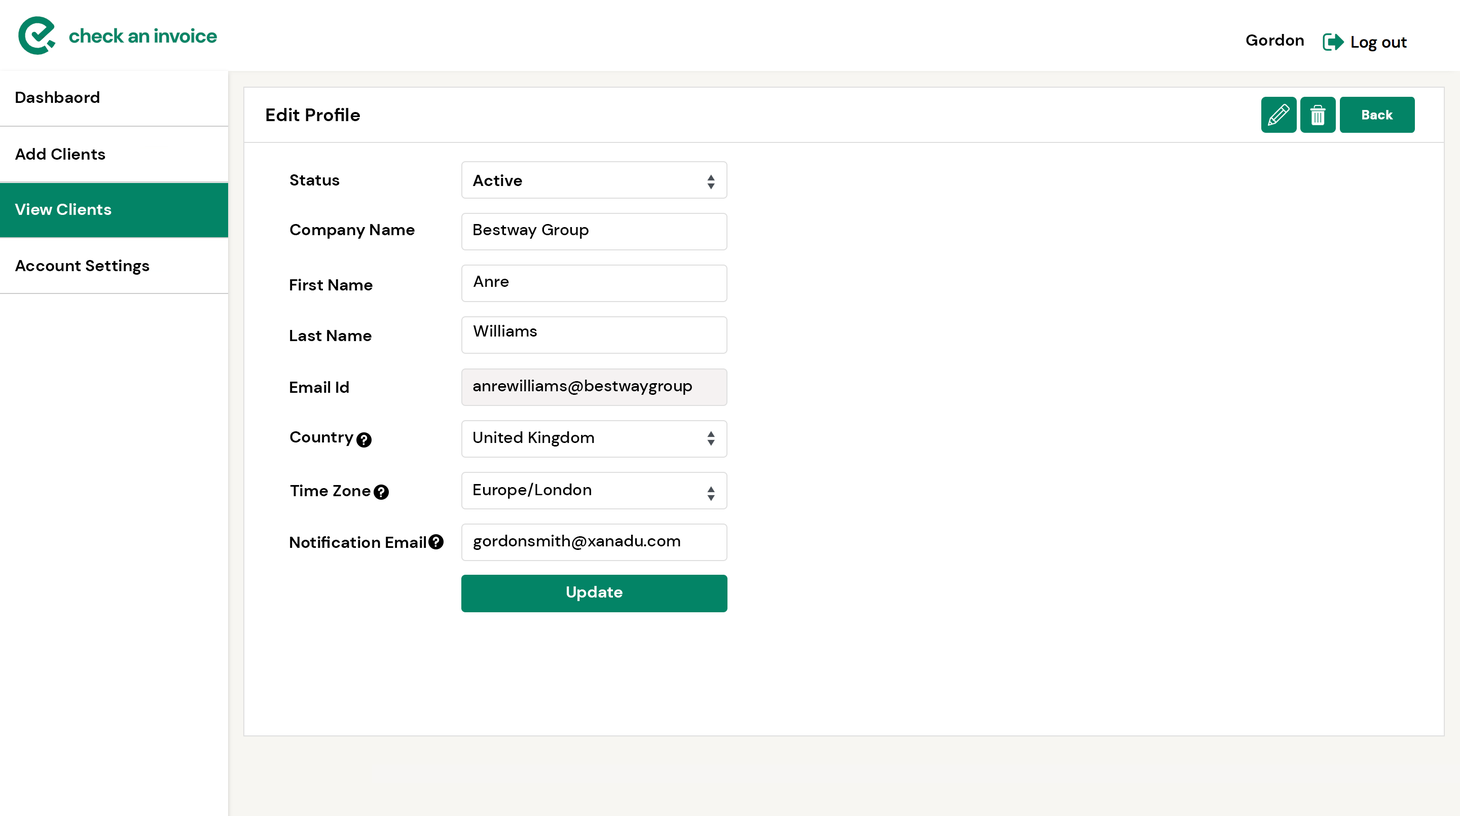
<style>
.page{position:relative;width:1460px;height:816px;background:#ffffff}
.page>*{position:absolute;margin:0}
.t1{font:16.2px "DMSans-Bold";color:#000000}
.t2{font:18.3px "DMSans-Bold";color:#010101}
.t3{font:12.7px "DMSans-Bold";color:#ffffff;font-weight:bold}
.t4{font:16.2px "DMSans-Bold";color:#ffffff}
.t5{font:16.2px "DMSans-Medium";color:#000000}
</style>
<div class="page">
<p class="t1" style="left:1246px;top:34px;width:58px;height:12px">Gordon</p>
<p class="t1" style="left:16px;top:91px;width:83px;height:12px">Dashbaord</p>
<p class="t2" style="left:266px;top:108px;width:94px;height:13px">Edit Profile</p>
<p class="t3" style="left:1363px;top:110px;width:31px;height:10px">Back</p>
<p class="t1" style="left:15px;top:148px;width:90px;height:12px">Add Clients</p>
<p class="t1" style="left:290px;top:174px;width:50px;height:12px">Status</p>
<p class="t1" style="left:473px;top:174px;width:49px;height:12px">Active</p>
<p class="t4" style="left:15px;top:203px;width:97px;height:12px">View Clients</p>
<p class="t1" style="left:290px;top:224px;width:125px;height:15px">Company Name</p>
<p class="t5" style="left:474px;top:224px;width:115px;height:15px">Bestway Group</p>
<p class="t1" style="left:15px;top:260px;width:135px;height:15px">Account Settings</p>
<p class="t1" style="left:290px;top:279px;width:83px;height:12px">First Name</p>
<p class="t5" style="left:473px;top:276px;width:36px;height:11px">Anre</p>
<p class="t5" style="left:473px;top:325px;width:64px;height:12px">Williams</p>
<p class="t1" style="left:290px;top:330px;width:82px;height:11px">Last Name</p>
<p class="t1" style="left:290px;top:381px;width:59px;height:12px">Email Id</p>
<p class="t5" style="left:473px;top:380px;width:219px;height:15px">anrewilliams@bestwaygroup</p>
<p class="t1" style="left:290px;top:432px;width:64px;height:14px">Country</p>
<p class="t5" style="left:474px;top:432px;width:120px;height:15px">United Kingdom</p>
<p class="t1" style="left:290px;top:485px;width:81px;height:11px">Time Zone</p>
<p class="t5" style="left:474px;top:483px;width:117px;height:16px">Europe/London</p>
<p class="t1" style="left:290px;top:537px;width:136px;height:11px">Notification Email</p>
<p class="t5" style="left:474px;top:535px;width:207px;height:15px">gordonsmith@xanadu.com</p>
<p class="t4" style="left:567px;top:586px;width:56px;height:15px">Update</p>
</div>
